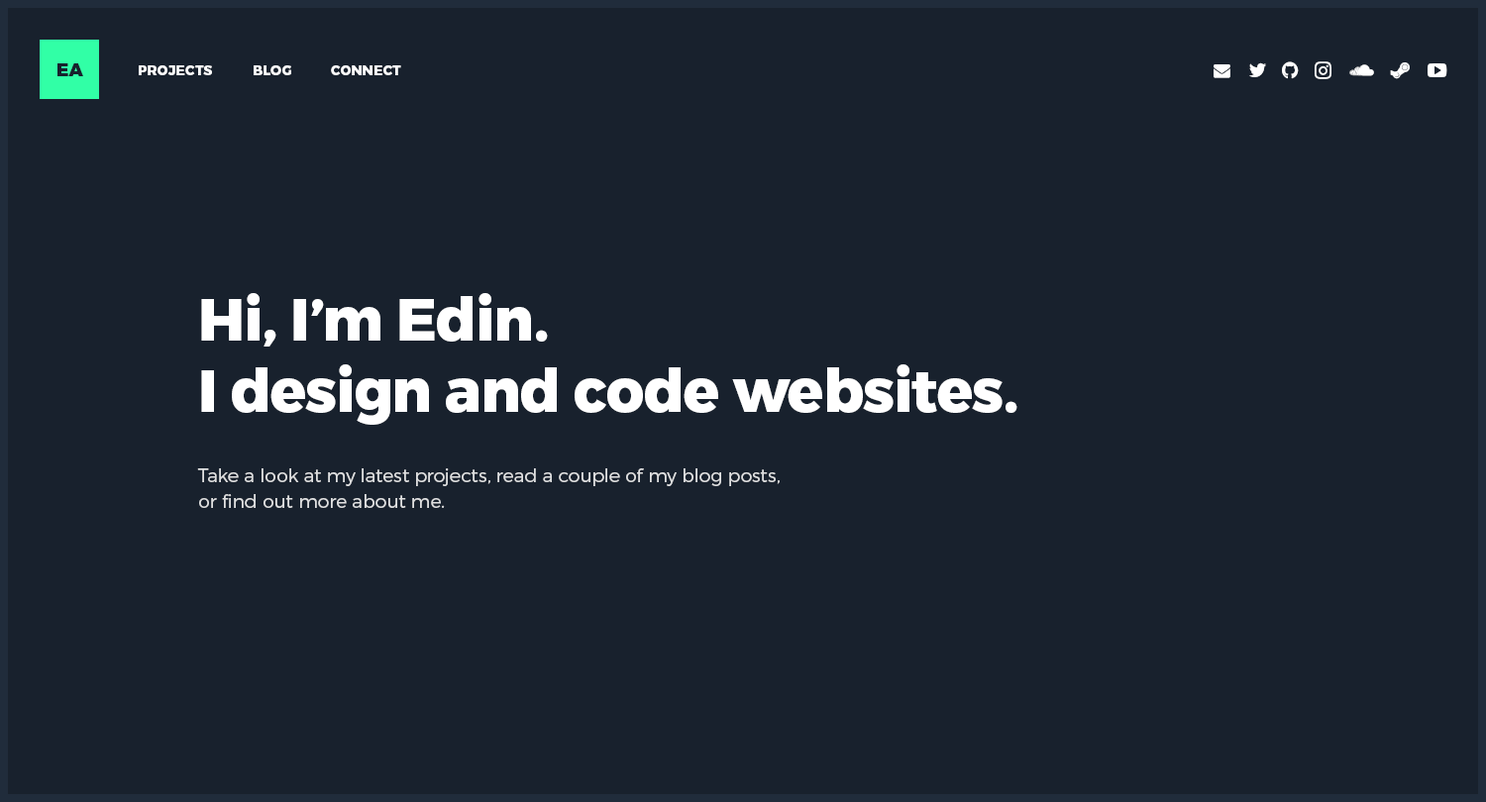
<style>
.page{position:relative;width:1486px;height:802px;background:#18212d}
.page>*{position:absolute;margin:0}
.t1{font:17.8px "Montserrat-Black";color:#18212d}
.t2{font:13.9px "Montserrat-ExtraBold";color:#ffffff}
.t3{font:59.4px "Montserrat-ExtraBold";color:#ffffff}
.t4{font:18.8px/25.8px "Montserrat-Light";color:#dedfe0}
</style>
<div class="page">
<p class="t1" style="left:57px;top:63px;width:26px;height:13px">EA</p>
<p class="t1" style="left:57px;top:63px;width:26px;height:13px">EA</p>
<p class="t2" style="left:139px;top:65px;width:73px;height:10px">PROJECTS</p>
<p class="t2" style="left:254px;top:65px;width:37px;height:10px">BLOG</p>
<p class="t2" style="left:331px;top:65px;width:70px;height:10px">CONNECT</p>
<p class="t3" style="left:201px;top:293px;width:816px;height:132px">Hi, I’m Edin.<br>I design and code websites.</p>
<p class="t4" style="left:197px;top:469px;width:583px;height:39px">Take a look at my latest projects, read a couple of my blog posts,<br>or find out more about me.</p>
</div>
